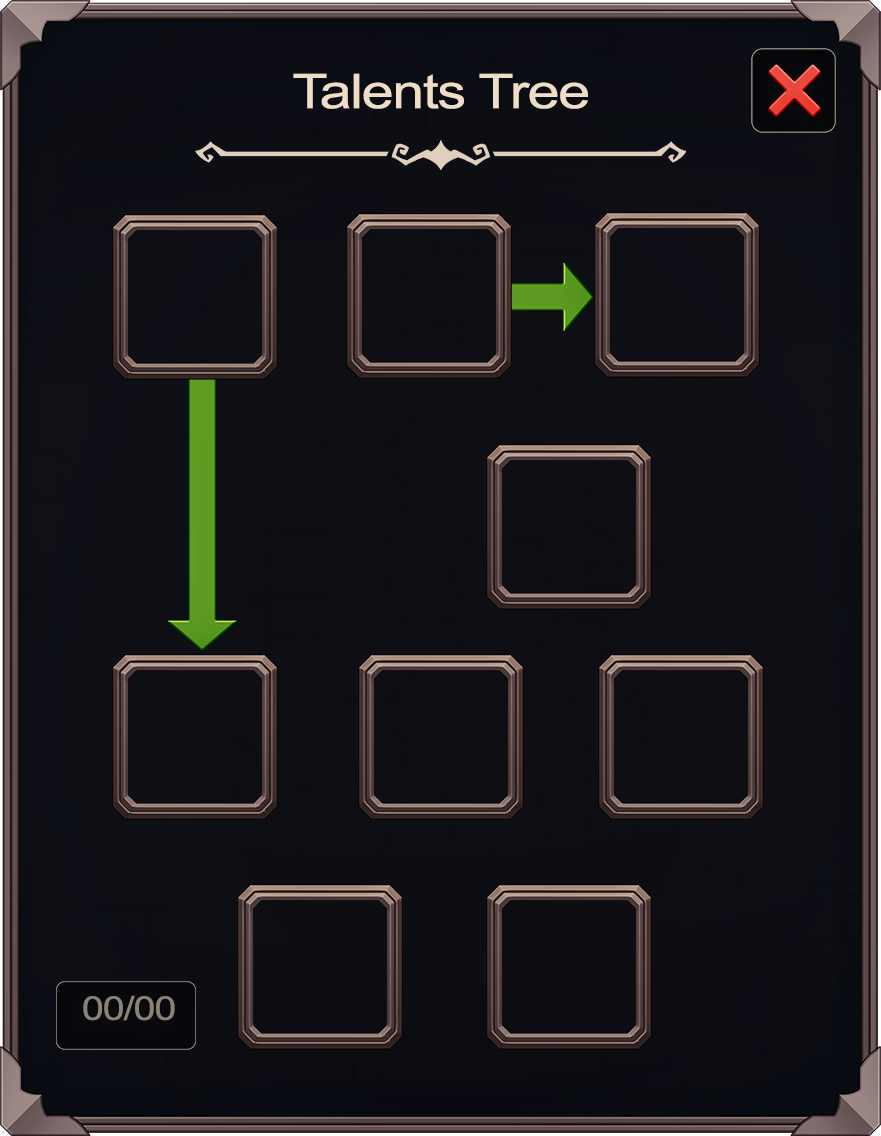
<style>
.page{position:relative;width:881px;height:1136px;background:#0e0f15}
.page>*{position:absolute;margin:0}
.t1{font:48px "ArialMT";letter-spacing:-0.025em;color:#eedec7;scale:1.2 1}
.t2{font:32.7px "ArialMT";letter-spacing:-0.025em;color:#8b8275;scale:1.2 1}
</style>
<div class="page">
<p class="t1" style="left:293px;top:73px;width:295px;height:36px">Talents Tree</p>
<p class="t2" style="left:83px;top:995px;width:92px;height:26px">00/00</p>
</div>
